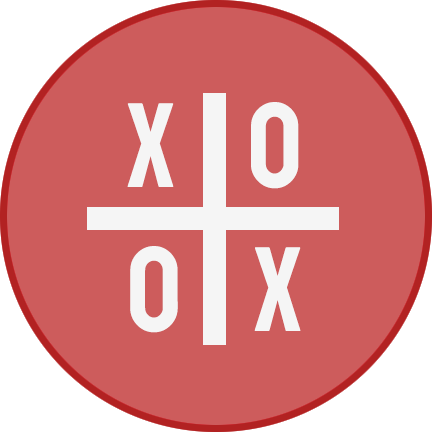
<style>
.page{position:relative;width:432px;height:432px;background:#cd5c5c}
.page>*{position:absolute;margin:0}
.t1{font:120px "Staatliches-Regular";color:#f5f5f5}
</style>
<div class="page">
<p class="t1" style="left:127px;top:102px;width:174px;height:231px">X    O<br>O    X</p>
</div>
